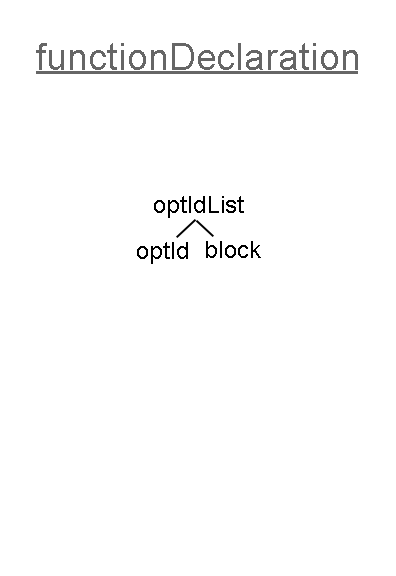
<style>
.page{position:relative;width:396px;height:576px;background:#ffffff}
.page>*{position:absolute;margin:0}
.t1{font:38px "ArialMT";color:#666666}
.t2{font:12px "ArialMT";color:#000000}
</style>
<div class="page">
<p class="t1" style="left:36px;top:43px;width:322px;height:27px">functionDeclaration</p>
<p class="t2" style="left:154px;top:196px;width:90px;height:22px">optIdList</p>
<p class="t2" style="left:137px;top:242px;width:51px;height:22px">optId</p>
<p class="t2" style="left:206px;top:241px;width:55px;height:17px">block</p>
</div>
